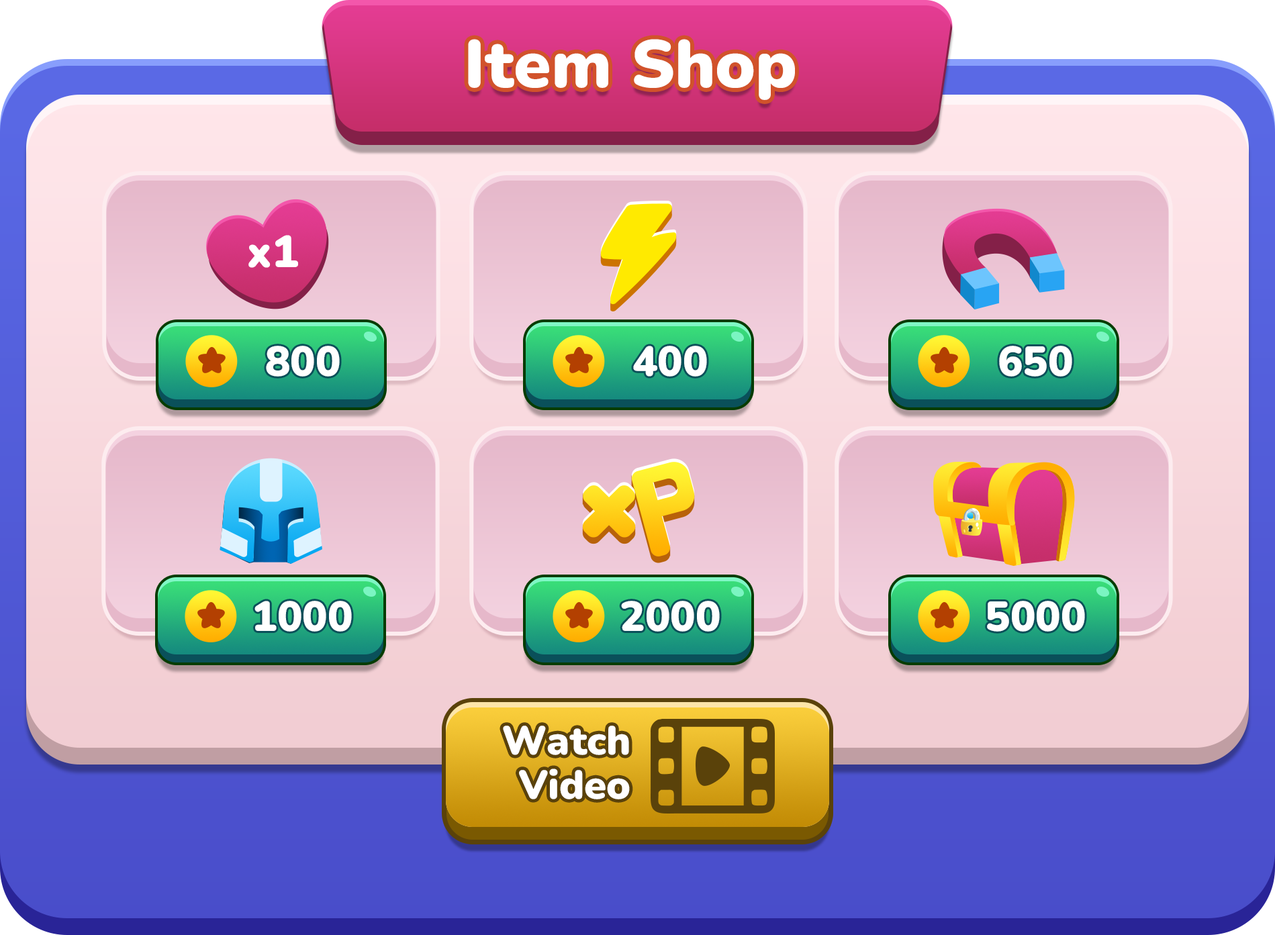
<style>
.page{position:relative;width:1275px;height:935px}
.page>*{position:absolute;margin:0}
.t1{font:67.1px "Nunito-Black";color:#ffffff}
.t2{font:44.8px "Nunito-Black";color:#ffffff}
.t3{font:41.9px "Nunito-Black";color:#ffffff}
.t4{font:40.3px/44.8px "Nunito-Black";color:#ffffff}
</style>
<div class="page">
<p class="t1" style="left:468px;top:39px;width:327px;height:61px">Item Shop</p>
<p class="t2" style="left:248px;top:235px;width:50px;height:33px">x1</p>
<p class="t3" style="left:266px;top:346px;width:74px;height:31px">800</p>
<p class="t3" style="left:633px;top:346px;width:74px;height:31px">400</p>
<p class="t3" style="left:999px;top:346px;width:73px;height:31px">650</p>
<p class="t3" style="left:254px;top:601px;width:98px;height:31px">1000</p>
<p class="t3" style="left:621px;top:601px;width:99px;height:31px">2000</p>
<p class="t3" style="left:987px;top:601px;width:98px;height:31px">5000</p>
<p class="t4" style="left:503px;top:726px;width:127px;height:74px;text-align:right">Watch<br>Video</p>
</div>
